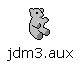
<style>
.page{position:relative;width:80px;height:80px;background:#ffffff}
.page>*{position:absolute;margin:0}
.t1{font:14px "MSReferenceSansSerif";color:#000000}
</style>
<div class="page">
<p class="t1" style="left:7px;top:47px;width:66px;height:14px">jdm3.aux</p>
</div>
